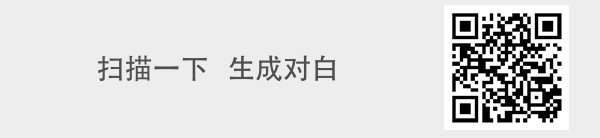
<style>
.page{position:relative;width:600px;height:138px;background:#ededed}
.page>*{position:absolute;margin:0}
.t1{font:28px "AdobeHeitiStd-Regular";color:#4f4f4f}
</style>
<div class="page">
<p class="t1" style="left:98px;top:55px;width:237px;height:27px">扫描一下   生成对白</p>
</div>
